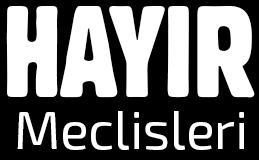
<style>
.page{position:relative;width:259px;height:160px;background:#000000}
.page>*{position:absolute;margin:0}
.t1{font:127px "Gothic821CondensedBT-Regular";color:#ffffff}
.t2{font:52.9px "Exo2-Regular";color:#ffffff}
</style>
<div class="page">
<p class="t1" style="left:6px;top:6px;width:249px;height:92px">HAYIR</p>
<p class="t2" style="left:17px;top:111px;width:227px;height:39px">Meclisleri</p>
</div>
